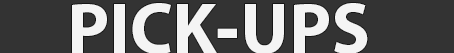
<style>
.page{position:relative;width:454px;height:53px;background:#333333}
.page>*{position:absolute;margin:0}
.t1{font:72px "MyriadHebrew-Bold";color:#f4f4f4}
</style>
<div class="page">
<p class="t1" style="left:72px;top:3px;width:296px;height:51px">PICK-UPS</p>
</div>
